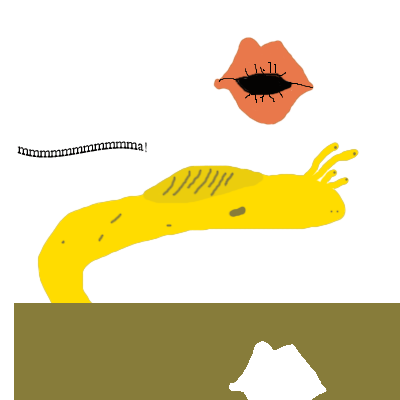
<style>
.page{position:relative;width:400px;height:400px;background:#ffffff}
.page>*{position:absolute;margin:0}
.t1{font:13.9px "TimesNewRomanPSMT";color:#040302}
</style>
<div class="page">
<p class="t1" style="left:17px;top:141px;width:130px;height:17px">mmmmmmmmmmma!</p>
</div>
